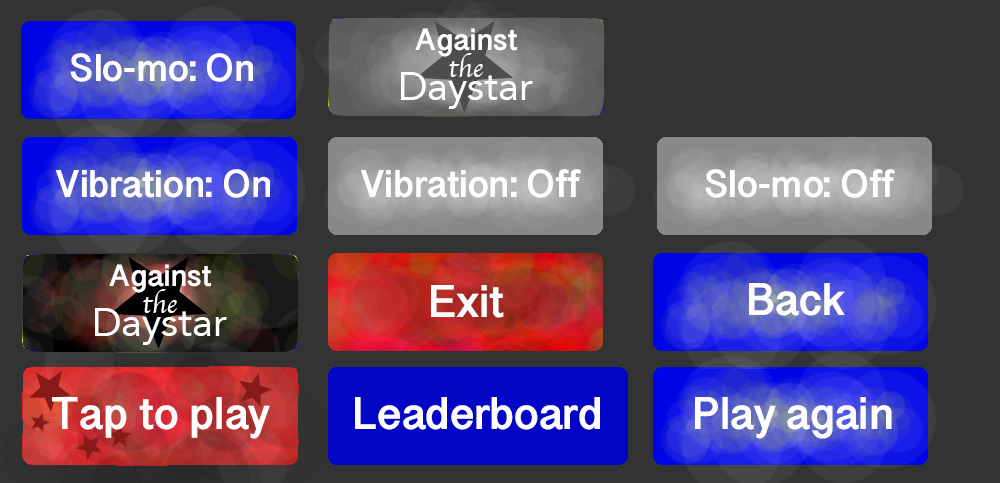
<style>
.page{position:relative;width:1000px;height:483px;background:#333333}
.page>*{position:absolute;margin:0}
.t1{font:31.5px "SinhalaSangamMN-Bold";color:#ffffff}
.t2{font:39.7px "SinhalaSangamMN-Bold";color:#ffffff}
.t3{font:27.7px "Apple-Chancery";color:#ffffff}
.t4{font:39.6px "Avenir-Roman";color:#ffffff}
.t5{font:47px "SinhalaSangamMN-Bold";color:#ffffff}
</style>
<div class="page">
<p class="t1" style="left:415px;top:28px;width:102px;height:29px">Against</p>
<p class="t2" style="left:70px;top:53px;width:183px;height:29px">Slo-mo: On</p>
<p class="t3" style="left:449px;top:53px;width:34px;height:24px">the</p>
<p class="t4" style="left:401px;top:72px;width:132px;height:37px">Daystar</p>
<p class="t2" style="left:55px;top:169px;width:215px;height:29px">Vibration: On</p>
<p class="t2" style="left:360px;top:169px;width:221px;height:29px">Vibration: Off</p>
<p class="t2" style="left:705px;top:169px;width:190px;height:29px">Slo-mo: Off</p>
<p class="t1" style="left:109px;top:264px;width:102px;height:29px">Against</p>
<p class="t3" style="left:143px;top:289px;width:34px;height:24px">the</p>
<p class="t5" style="left:431px;top:285px;width:73px;height:33px">Exit</p>
<p class="t5" style="left:749px;top:283px;width:96px;height:33px">Back</p>
<p class="t4" style="left:95px;top:308px;width:132px;height:37px">Daystar</p>
<p class="t5" style="left:52px;top:397px;width:218px;height:42px">Tap to play</p>
<p class="t5" style="left:355px;top:397px;width:245px;height:33px">Leaderboard</p>
<p class="t5" style="left:695px;top:397px;width:197px;height:42px">Play again</p>
</div>
